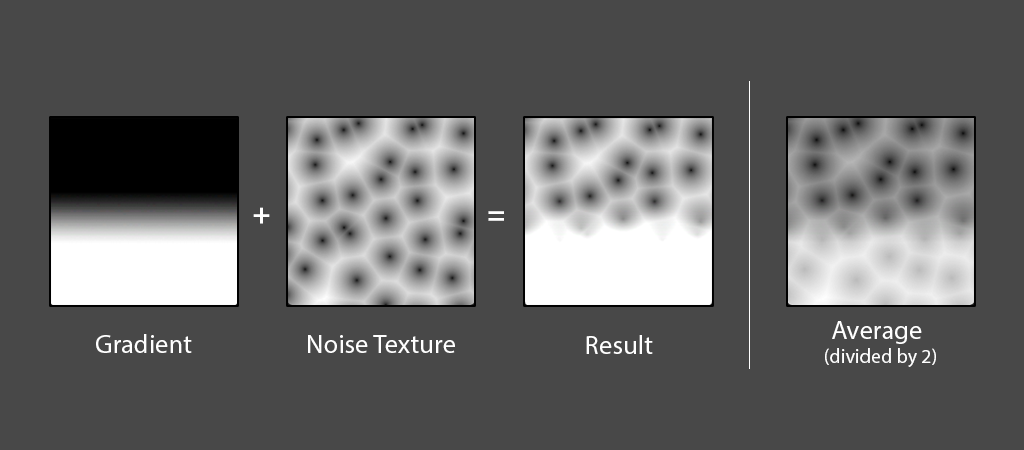
<style>
.page{position:relative;width:1024px;height:450px;background:#484848}
.page>*{position:absolute;margin:0}
.t1{font:30px "MyriadPro-Bold";color:#ffffff}
.t2{font:20px "MyriadPro-Regular";color:#ffffff}
.t3{font:26.7px "MyriadPro-Regular";color:#ffffff}
</style>
<div class="page">
<p class="t1" style="left:253px;top:207px;width:17px;height:17px">+</p>
<p class="t1" style="left:488px;top:211px;width:16px;height:10px">=</p>
<p class="t2" style="left:825px;top:321px;width:111px;height:46px;text-align:center"><span class="t3">Average <br></span>(divided by 2)</p>
<p class="t3" style="left:96px;top:334px;width:96px;height:19px">Gradient</p>
<p class="t3" style="left:308px;top:335px;width:147px;height:18px">Noise Texture</p>
<p class="t3" style="left:586px;top:335px;width:67px;height:19px">Result</p>
</div>
